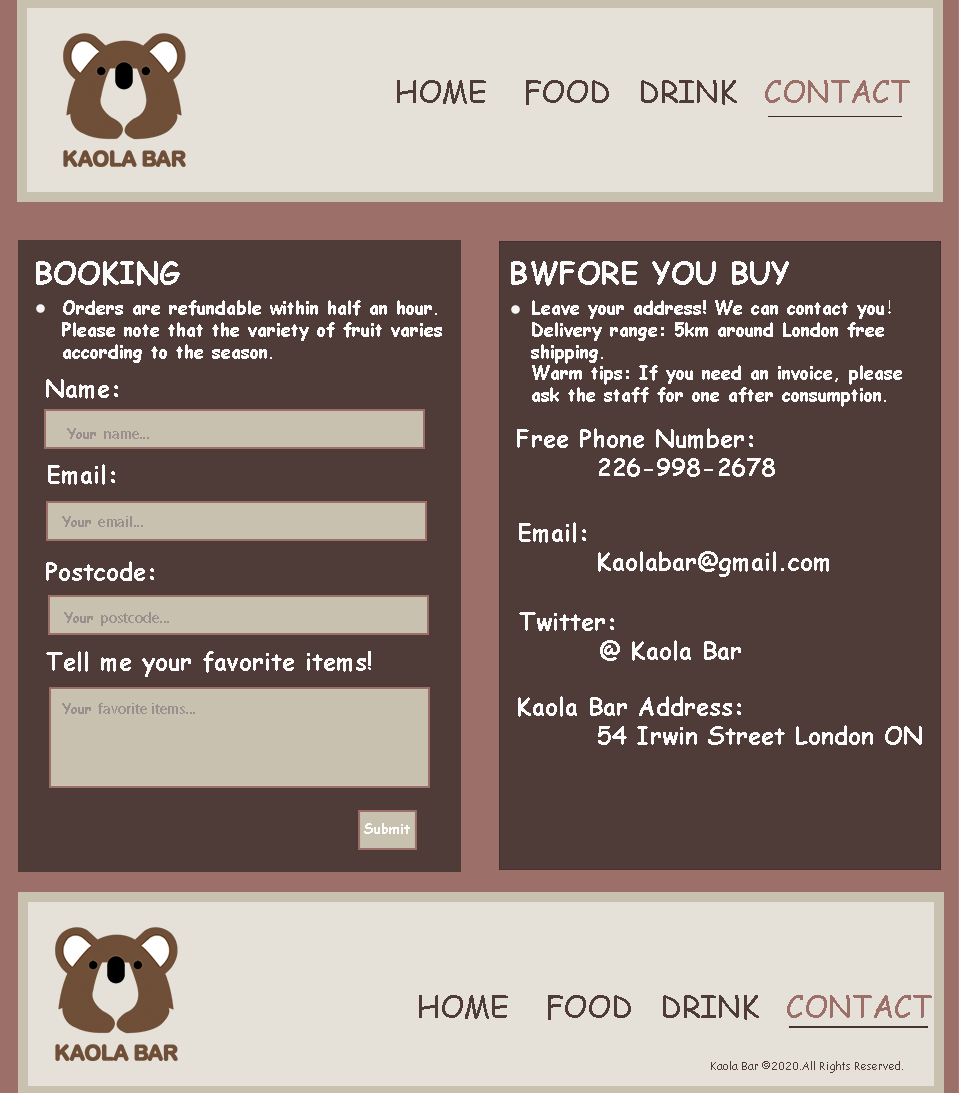
<style>
.page{position:relative;width:960px;height:1093px;background:#4f3b38}
.page>*{position:absolute;margin:0}
.t1{font:30px "ComicSansMS";color:#4f3b38}
.t2{font:30px "ComicSansMS";color:#9c6f69}
.t3{font:30px "ComicSansMS-Bold";color:#fcfbfb}
.t4{font:18px "ComicSansMS-Bold";color:#fcfbfb}
.t5{font:18px "AdobeHeitiStd-Regular";color:#fcfbfb}
.t6{font:24px "ComicSansMS-Bold";color:#fcfbfb}
.t7{font:14px "AdobeHeitiStd-Regular";color:#9b8f8d}
.t8{font:14px "ComicSansMS-Bold";color:#9b8f8d}
.t9{font:14px "ComicSansMS-Bold";color:#fcfbfb}
.t10{font:11px "ComicSansMS";color:#4f3b38}
</style>
<div class="page">
<p class="t1" style="left:397px;top:80px;width:513px;height:25px">HOME    FOOD   DRINK   <span class="t2">CONTACT</span></p>
<p class="t3" style="left:36px;top:261px;width:144px;height:25px">BOOKING</p>
<p class="t3" style="left:511px;top:261px;width:278px;height:25px">BWFORE YOU BUY</p>
<p class="t4" style="left:62px;top:300px;width:380px;height:63px">Orders are refundable within half an hour.<br>Please note that the variety of fruit varies <br>according to the season.</p>
<p class="t4" style="left:531px;top:300px;width:371px;height:107px">Leave your address! We can contact you<span class="t5">！<br></span>Delivery range: 5km around London free <br>shipping. <br>Warm tips: If you need an invoice, please <br>ask the staff for one after consumption.</p>
<p class="t6" style="left:46px;top:379px;width:72px;height:20px">Name:</p>
<p class="t7" style="left:67px;top:428px;width:82px;height:11px"><span class="t8">Your </span>name...</p>
<p class="t6" style="left:517px;top:428px;width:258px;height:49px">Free Phone Number:<br>        226-998-2678</p>
<p class="t6" style="left:48px;top:464px;width:67px;height:21px">Email:</p>
<p class="t7" style="left:62px;top:516px;width:81px;height:11px"><span class="t8">Your </span>email...</p>
<p class="t6" style="left:519px;top:522px;width:310px;height:55px">Email:<br>        Kaolabar@gmail.com</p>
<p class="t6" style="left:46px;top:561px;width:108px;height:20px">Postcode:</p>
<p class="t7" style="left:64px;top:612px;width:105px;height:14px"><span class="t8">Your </span>postcode...</p>
<p class="t6" style="left:519px;top:612px;width:222px;height:49px">Twitter:<br>        @ Kaola Bar</p>
<p class="t6" style="left:46px;top:651px;width:325px;height:26px">Tell me your favorite items!</p>
<p class="t6" style="left:518px;top:696px;width:404px;height:49px">Kaola Bar Address:<br>        54 Irwin Street London ON</p>
<p class="t7" style="left:62px;top:703px;width:133px;height:11px"><span class="t8">Your </span>favorite items...</p>
<p class="t9" style="left:364px;top:823px;width:46px;height:11px">Submit</p>
<p class="t1" style="left:419px;top:995px;width:513px;height:25px">HOME    FOOD   DRINK   <span class="t2">CONTACT</span></p>
<p class="t10" style="left:711px;top:1061px;width:192px;height:12px">Kaola Bar ©2020.All Rights Reserved.</p>
</div>
